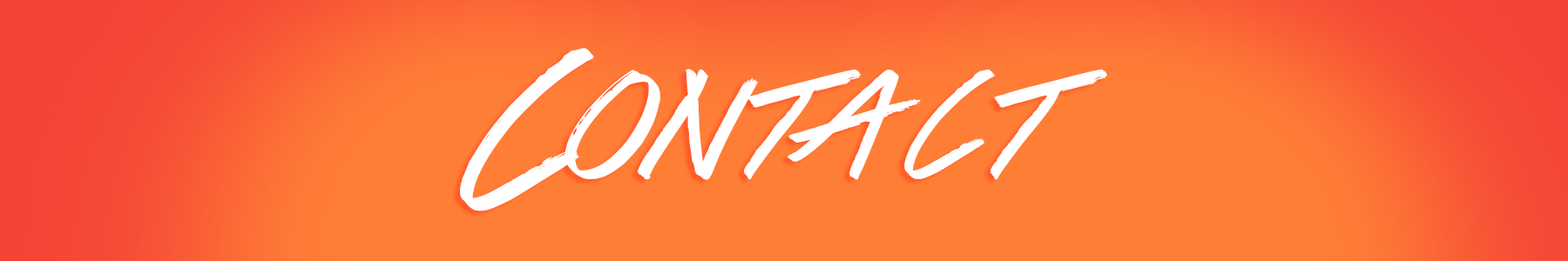
<style>
.page{position:relative;width:1568px;height:261px;background:#ff7e36}
.page>*{position:absolute;margin:0}
.t1{font:156.8px "ColorsOfAutumn";color:#ffffff}
</style>
<div class="page">
<p class="t1" style="left:460px;top:48px;width:648px;height:164px">Contact</p>
</div>
